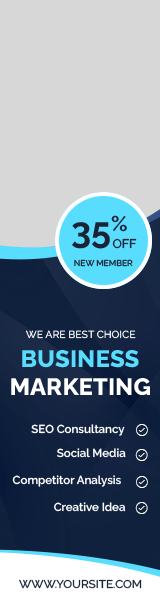
<style>
.page{position:relative;width:160px;height:600px;background:#d7d7d7}
.page>*{position:absolute;margin:0}
.t1{font:36.3px "Raleway-Bold";color:#192437}
.t2{font:12.5px "Raleway-Medium";color:#192437}
.t3{font:8.6px "Raleway-Medium";color:#192437}
.t4{font:10.3px "Raleway-Medium";color:#ffffff}
.t5{font:23.7px "Raleway-ExtraBold";color:#58ddfe}
.t6{font:23.7px "Raleway-ExtraBold";color:#ffffff}
.t7{font:11.4px "Raleway-SemiBold";color:#ffffff}
.t8{font:11.3px "Raleway-Medium";color:#192437;scale:1.03 1}
</style>
<div class="page">
<p class="t1" style="left:72px;top:215px;width:55px;height:34px">35%</p>
<p class="t2" style="left:112px;top:238px;width:25px;height:11px">OFF</p>
<p class="t3" style="left:74px;top:259px;width:59px;height:8px">NEW MEMBER</p>
<p class="t4" style="left:25px;top:330px;width:111px;height:9px">WE ARE BEST CHOICE</p>
<p class="t5" style="left:22px;top:350px;width:117px;height:18px">BUSINESS</p>
<p class="t6" style="left:11px;top:378px;width:139px;height:17px">MARKETING</p>
<p class="t7" style="left:31px;top:424px;width:94px;height:12px">SEO Consultancy</p>
<p class="t7" style="left:57px;top:448px;width:69px;height:10px">Social Media</p>
<p class="t7" style="left:12px;top:475px;width:109px;height:12px">Competitor Analysis</p>
<p class="t7" style="left:54px;top:502px;width:72px;height:10px">Creative Idea</p>
<p class="t8" style="left:19px;top:579px;width:123px;height:10px">WWW.YOURSITE.COM</p>
</div>
